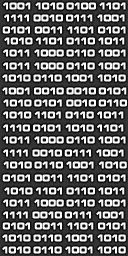
<style>
.page{position:relative;width:128px;height:256px}
.page>*{position:absolute;margin:0}
.t1{font:10px "MicrogrammaD-BoldExte";color:#ffffff;font-weight:bold;scale:0.83 1}
</style>
<div class="page">
<p class="t1" style="left:3px;top:2px;width:123px;height:8px">1001 1010 0100 1101</p>
<p class="t1" style="left:4px;top:14px;width:121px;height:8px">1111 0010 0111 1001</p>
<p class="t1" style="left:2px;top:26px;width:124px;height:8px">0101 0011 1101 0101</p>
<p class="t1" style="left:4px;top:37px;width:121px;height:8px">1010 1101 0110 1011</p>
<p class="t1" style="left:3px;top:49px;width:123px;height:8px">1011 1000 0110 1001</p>
<p class="t1" style="left:3px;top:62px;width:123px;height:8px">1011 1000 0110 1001</p>
<p class="t1" style="left:2px;top:74px;width:124px;height:8px">1010 0110 1001 1010</p>
<p class="t1" style="left:2px;top:87px;width:125px;height:8px">1001 0010 0010 0101</p>
<p class="t1" style="left:3px;top:99px;width:124px;height:8px">1010 0101 0010 0110</p>
<p class="t1" style="left:3px;top:111px;width:121px;height:8px">1010 1101 0110 1011</p>
<p class="t1" style="left:3px;top:124px;width:121px;height:8px">1110 0101 1010 1101</p>
<p class="t1" style="left:3px;top:136px;width:123px;height:8px">1011 1000 0110 1001</p>
<p class="t1" style="left:3px;top:149px;width:121px;height:8px">1111 0010 0111 1001</p>
<p class="t1" style="left:3px;top:161px;width:124px;height:8px">1010 0110 1001 1010</p>
<p class="t1" style="left:2px;top:174px;width:124px;height:8px">0101 0011 1101 0101</p>
<p class="t1" style="left:4px;top:187px;width:121px;height:8px">1010 1101 0110 1011</p>
<p class="t1" style="left:3px;top:199px;width:123px;height:8px">1011 1000 0110 1001</p>
<p class="t1" style="left:2px;top:222px;width:124px;height:8px">0101 0011 1101 0101</p>
<p class="t1" style="left:3px;top:211px;width:121px;height:8px">1111 0010 0111 1001</p>
<p class="t1" style="left:2px;top:234px;width:124px;height:8px">1010 0110 1001 1010</p>
<p class="t1" style="left:2px;top:246px;width:124px;height:8px">1010 0110 1001 1010</p>
</div>
